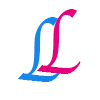
<style>
.page{position:relative;width:100px;height:100px;background:#ffffff}
.page>*{position:absolute;margin:0}
.t1{font:93.3px "Apple-Chancery";color:#1587e8;scale:0.71 1}
.t2{font:93.3px "Apple-Chancery";color:#e5007e;scale:0.71 1}
</style>
<div class="page">
<p class="t1" style="left:17px;top:17px;width:45px;height:65px">L</p>
<p class="t2" style="left:36px;top:9px;width:45px;height:65px">L</p>
</div>
